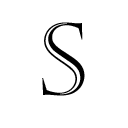
<style>
.page{position:relative;width:128px;height:128px;background:#ffffff}
.page>*{position:absolute;margin:0}
.t1{font:100px "Castellar";color:#000000}
</style>
<div class="page">
<p class="t1" style="left:42px;top:22px;width:43px;height:74px">S</p>
</div>
